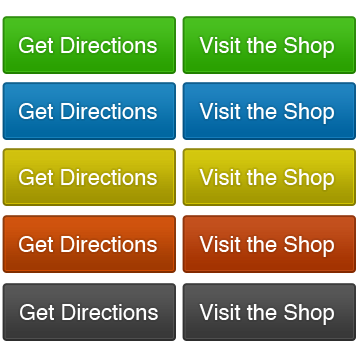
<style>
.page{position:relative;width:360px;height:360px;background:#ffffff}
.page>*{position:absolute;margin:0}
.t1{font:22px "Helvetica";color:#ffffff}
</style>
<div class="page">
<p class="t1" style="left:19px;top:37px;width:138px;height:16px">Get Directions</p>
<p class="t1" style="left:199px;top:37px;width:135px;height:21px">Visit the Shop</p>
<p class="t1" style="left:199px;top:103px;width:135px;height:21px">Visit the Shop</p>
<p class="t1" style="left:199px;top:169px;width:135px;height:21px">Visit the Shop</p>
<p class="t1" style="left:199px;top:236px;width:135px;height:21px">Visit the Shop</p>
<p class="t1" style="left:20px;top:304px;width:138px;height:16px">Get Directions</p>
<p class="t1" style="left:199px;top:304px;width:135px;height:21px">Visit the Shop</p>
</div>
